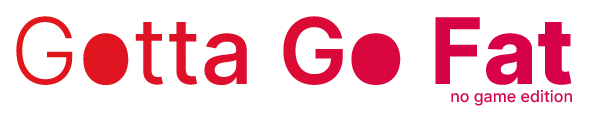
<style>
.page{position:relative;width:589px;height:121px;background:#ffffff}
.page>*{position:absolute;margin:0}
.t1{font:91.7px "InterV-Light";color:#de0346}
.t2{font:91.7px "InterV_360.000wght";color:#de0346}
.t3{font:91.7px "InterV_420.000wght";color:#de0346}
.t4{font:91.7px "InterV_480.000wght";color:#de0346}
.t5{font:91.7px "InterV_540.000wght";color:#de0346}
.t6{font:91.7px "InterV-SemiBold";color:#de0346}
.t7{font:91.7px "InterV_660.000wght";color:#de0346}
.t8{font:91.7px "InterV_720.000wght";color:#de0346}
.t9{font:91.7px "InterV_780.000wght";color:#de0346}
.t10{font:91.7px "InterV_840.000wght";color:#de0346}
.t11{font:16px "InterV-Medium";color:#de0346}
</style>
<div class="page">
<p class="t1" style="left:16px;top:16px;width:556px;height:69px">G<span class="t2">o</span><span class="t3">t</span><span class="t4">t</span><span class="t5">a </span><span class="t6">G</span><span class="t7">o </span><span class="t8">F</span><span class="t9">a</span><span class="t10">t</span></p>
<p class="t11" style="left:451px;top:90px;width:121px;height:16px">no game edition</p>
</div>
